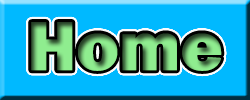
<style>
.page{position:relative;width:250px;height:100px;background:#00b9ff}
.page>*{position:absolute;margin:0}
.t1{font:72px "FranklinGothic-Heavy";color:#90ee90}
</style>
<div class="page">
<p class="t1" style="left:31px;top:22px;width:191px;height:49px">Home</p>
</div>
